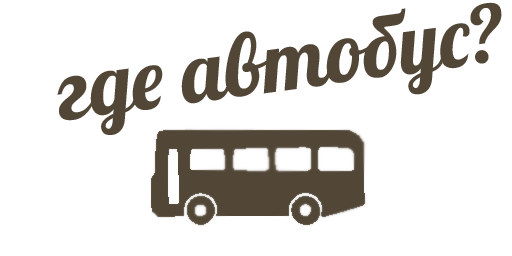
<style>
.page{position:relative;width:512px;height:256px;background:#ffffff}
.page>*{position:absolute;margin:0}
.t1{font:84.7px "Lobster";color:#524838}
</style>
<div class="page">
<p class="t1" style="left:57px;top:2px;width:445px;height:133px;rotate:-8deg">где автобус?</p>
</div>
